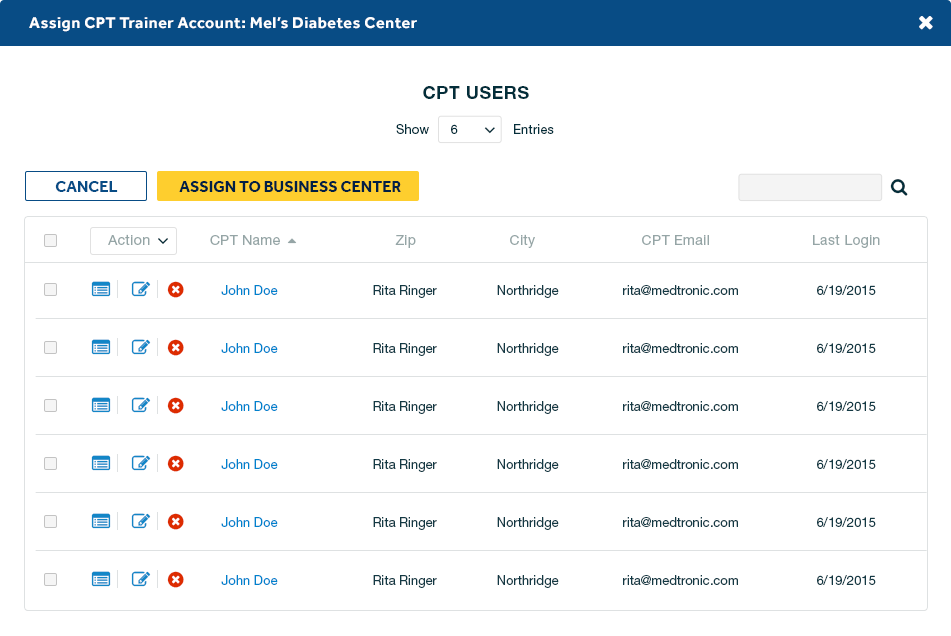
<style>
.page{position:relative;width:951px;height:636px;background:#ffffff}
.page>*{position:absolute;margin:0}
.t1{font:16.4px "Effra-Bold";letter-spacing:0.025em;color:#ffffff}
.t2{font:18px "HelveticaNeueLTStd-Bd";letter-spacing:0.025em;color:#032e3a;text-transform:uppercase}
.t3{font:12.7px "HelveticaNeueLTStd-Roman";letter-spacing:0.025em;color:#032e3a}
.t4{font:12.7px "HelveticaNeueLTStd-Roman";letter-spacing:0.025em;color:#032e3a;text-transform:uppercase}
.t5{font:16px "Effra-Bold";color:#084c85;text-transform:uppercase}
.t6{font:16px "Effra-Bold";color:#011f45;text-transform:uppercase}
.t7{font:14px "HelveticaNeueLTStd-Roman";letter-spacing:0.025em;color:#95a5a6}
.t8{font:13px "HelveticaNeueLTStd-Roman";color:#0082cd}
.t9{font:13px "HelveticaNeueLTStd-Roman";color:#133944}
</style>
<div class="page">
<p class="t1" style="left:29px;top:17px;width:388px;height:15px">Assign CPT Trainer Account: Mel’s Diabetes Center</p>
<p class="t2" style="left:423px;top:86px;width:106px;height:13px">CPT users</p>
<p class="t3" style="left:396px;top:124px;width:33px;height:10px">Show</p>
<p class="t4" style="left:451px;top:124px;width:7px;height:10px">6</p>
<p class="t3" style="left:514px;top:124px;width:40px;height:10px">Entries</p>
<p class="t5" style="left:55px;top:181px;width:63px;height:11px">Cancel</p>
<p class="t6" style="left:179px;top:181px;width:222px;height:11px">Assign to business center</p>
<p class="t7" style="left:108px;top:234px;width:772px;height:14px">Action              CPT Name                           Zip                      City                         CPT Email                        Last Login</p>
<p class="t8" style="left:221px;top:285px;width:57px;height:10px">John Doe</p>
<p class="t9" style="left:373px;top:285px;width:64px;height:13px">Rita Ringer</p>
<p class="t9" style="left:497px;top:285px;width:62px;height:13px">Northridge</p>
<p class="t9" style="left:623px;top:285px;width:115px;height:10px">rita@medtronic.com</p>
<p class="t9" style="left:817px;top:285px;width:59px;height:10px">6/19/2015</p>
<p class="t8" style="left:221px;top:343px;width:57px;height:10px">John Doe</p>
<p class="t9" style="left:373px;top:343px;width:64px;height:13px">Rita Ringer</p>
<p class="t9" style="left:497px;top:343px;width:62px;height:13px">Northridge</p>
<p class="t9" style="left:623px;top:343px;width:115px;height:10px">rita@medtronic.com</p>
<p class="t9" style="left:817px;top:343px;width:59px;height:10px">6/19/2015</p>
<p class="t8" style="left:221px;top:401px;width:57px;height:10px">John Doe</p>
<p class="t9" style="left:373px;top:401px;width:64px;height:13px">Rita Ringer</p>
<p class="t9" style="left:497px;top:401px;width:62px;height:13px">Northridge</p>
<p class="t9" style="left:623px;top:401px;width:115px;height:10px">rita@medtronic.com</p>
<p class="t9" style="left:817px;top:401px;width:59px;height:10px">6/19/2015</p>
<p class="t8" style="left:221px;top:459px;width:57px;height:10px">John Doe</p>
<p class="t9" style="left:373px;top:459px;width:64px;height:13px">Rita Ringer</p>
<p class="t9" style="left:497px;top:459px;width:62px;height:13px">Northridge</p>
<p class="t9" style="left:623px;top:459px;width:115px;height:10px">rita@medtronic.com</p>
<p class="t9" style="left:817px;top:459px;width:59px;height:10px">6/19/2015</p>
<p class="t8" style="left:221px;top:517px;width:57px;height:10px">John Doe</p>
<p class="t9" style="left:373px;top:517px;width:64px;height:13px">Rita Ringer</p>
<p class="t9" style="left:497px;top:517px;width:62px;height:13px">Northridge</p>
<p class="t9" style="left:623px;top:517px;width:115px;height:10px">rita@medtronic.com</p>
<p class="t9" style="left:817px;top:517px;width:59px;height:10px">6/19/2015</p>
<p class="t8" style="left:221px;top:575px;width:57px;height:10px">John Doe</p>
<p class="t9" style="left:373px;top:575px;width:64px;height:13px">Rita Ringer</p>
<p class="t9" style="left:497px;top:575px;width:62px;height:13px">Northridge</p>
<p class="t9" style="left:623px;top:575px;width:115px;height:10px">rita@medtronic.com</p>
<p class="t9" style="left:817px;top:575px;width:59px;height:10px">6/19/2015</p>
</div>
